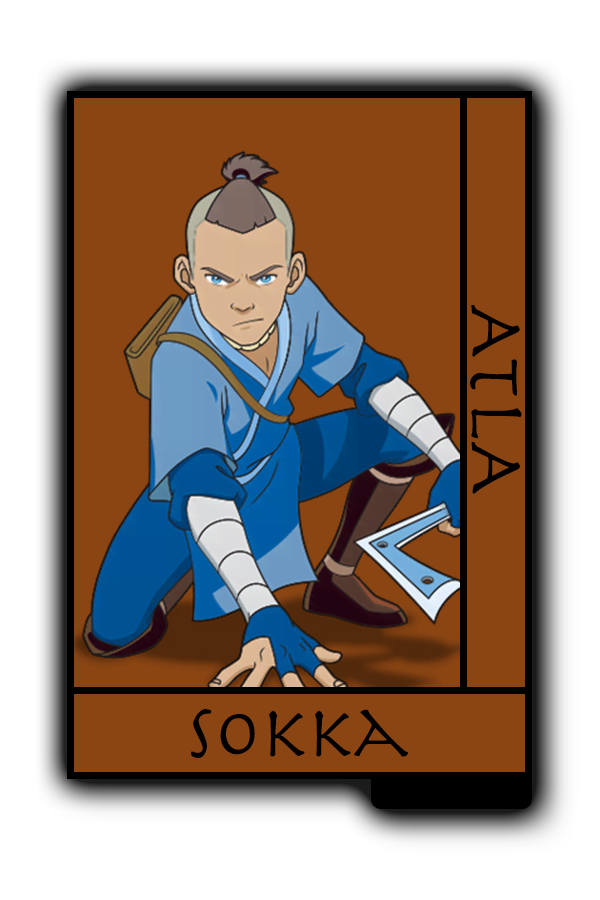
<style>
.page{position:relative;width:600px;height:900px;background:#8a4513}
.page>*{position:absolute;margin:0}
.t1{font:80.7px "Herculanum";color:#000000}
.t2{font:75px "Herculanum";color:#000000}
</style>
<div class="page">
<p class="t1" style="left:470px;top:305px;width:52px;height:189px;rotate:90deg">ATLA</p>
<p class="t2" style="left:191px;top:709px;width:217px;height:49px">sokka</p>
</div>
